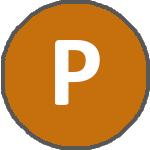
<style>
.page{position:relative;width:150px;height:150px;background:#c5700c}
.page>*{position:absolute;margin:0}
.t1{font:103px "Calibri-Bold";color:#ffffff}
</style>
<div class="page">
<p class="t1" style="left:55px;top:40px;width:45px;height:65px">P</p>
</div>
